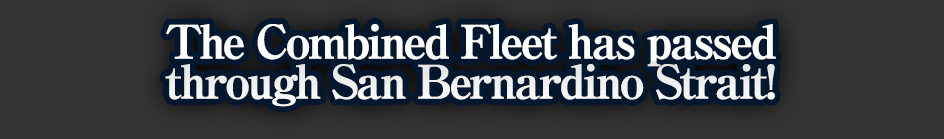
<style>
.page{position:relative;width:944px;height:139px;background:#333333}
.page>*{position:absolute;margin:0}
.t1{font:46px/40px "RyuminPro-ExBold";letter-spacing:-0.08em;color:#ffffff;font-weight:bold}
</style>
<div class="page">
<p class="t1" style="left:165px;top:24px;width:611px;height:83px;text-align:center">The Combined Fleet has passed<br>through San Bernardino Strait!</p>
</div>
